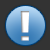
<style>
.page{position:relative;width:50px;height:50px;background:#333333}
.page>*{position:absolute;margin:0}
.t1{font:40.3px "Tahoma";letter-spacing:-0.08em;color:#ffffff;font-weight:bold;scale:1.51 1}
</style>
<div class="page">
<p class="t1" style="left:20px;top:11px;width:10px;height:30px">!</p>
</div>
